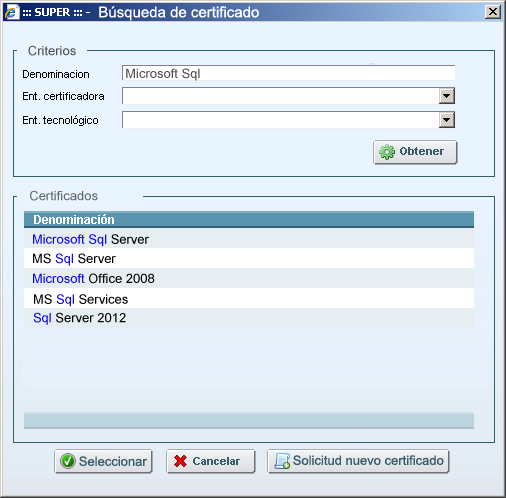
<style>
.page{position:relative;width:506px;height:498px;background:#e8f4ff}
.page>*{position:absolute;margin:0}
.t1{font:15px "ArialMT";color:#ffffff}
.t2{font:13px "ArialMT";color:#505050}
.t3{font:13px "ArialMT";color:#65686b}
.t4{font:13px "ArialMT";color:#0e08ed}
.t5{font:13px "ArialMT";color:#010101}
.t6{font:13px "ArialMT";color:#375c6c}
</style>
<div class="page">
<p class="t1" style="left:99px;top:6px;width:160px;height:15px">Búsqueda de certificado</p>
<p class="t2" style="left:28px;top:45px;width:48px;height:11px">Criterios</p>
<p class="t2" style="left:126px;top:68px;width:74px;height:13px">Microsoft Sql</p>
<p class="t3" style="left:30px;top:190px;width:68px;height:11px">Certificados</p>
<p class="t4" style="left:33px;top:234px;width:116px;height:13px">Microsoft Sql<span class="t5"> Server</span></p>
<p class="t5" style="left:33px;top:253px;width:83px;height:13px">MS <span class="t4">Sql</span> Server</p>
<p class="t5" style="left:33px;top:273px;width:122px;height:11px"><span class="t4">Microsoft</span> Office 2008</p>
<p class="t5" style="left:34px;top:294px;width:94px;height:13px">MS <span class="t4">Sql</span> Services</p>
<p class="t5" style="left:33px;top:312px;width:93px;height:13px"><span class="t4">Sql</span> Server 2012</p>
<p class="t6" style="left:79px;top:456px;width:68px;height:11px">Seleccionar</p>
<p class="t6" style="left:293px;top:455px;width:151px;height:11px">Solicitud nuevo certificado</p>
</div>
